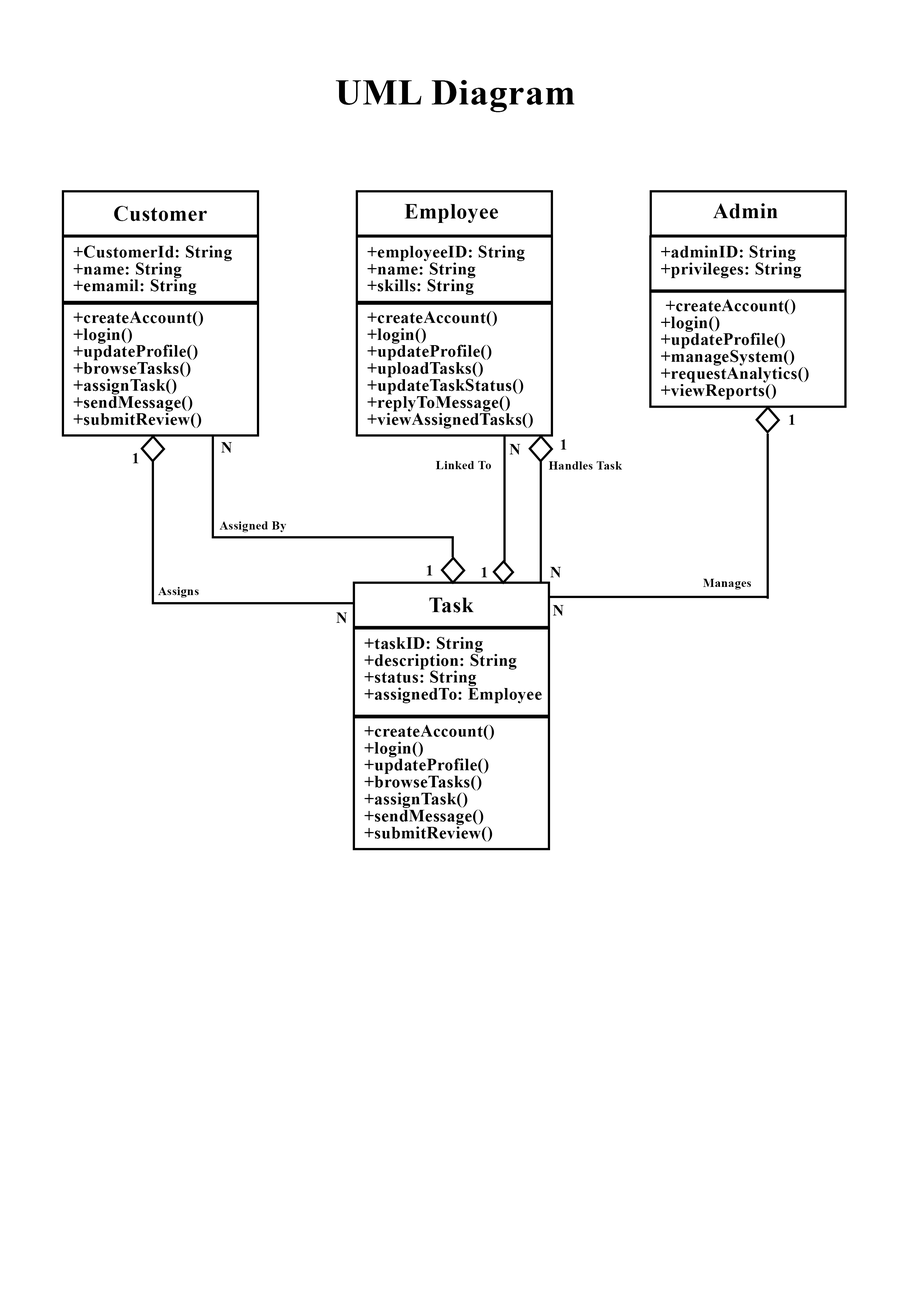
<style>
.page{position:relative;width:918px;height:1299px;background:#ffffff}
.page>*{position:absolute;margin:0}
.t1{font:36px "TimesNewRomanPS-BoldMT";letter-spacing:0.02em;color:#000000}
.t2{font:21.6px "TimesNewRomanPS-BoldMT";letter-spacing:0.02em;color:#000000}
.t3{font:17px/17px "TimesNewRomanPS-BoldMT";letter-spacing:0.02em;color:#000000}
.t4{font:15.4px "TimesNewRomanPS-BoldMT";letter-spacing:0.02em;color:#000000}
.t5{font:12.3px "TimesNewRomanPS-BoldMT";letter-spacing:0.02em;color:#000000}
</style>
<div class="page">
<p class="t1" style="left:336px;top:80px;width:239px;height:32px">UML Diagram</p>
<p class="t2" style="left:114px;top:206px;width:93px;height:15px">Customer</p>
<p class="t2" style="left:405px;top:204px;width:93px;height:19px">Employee</p>
<p class="t2" style="left:713px;top:203px;width:65px;height:15px">Admin</p>
<p class="t3" style="left:74px;top:245px;width:158px;height:50px">+CustomerId: String<br>+name: String<br>+emamil: String</p>
<p class="t3" style="left:368px;top:245px;width:157px;height:50px">+employeeID: String<br>+name: String<br>+skills: String</p>
<p class="t3" style="left:661px;top:245px;width:141px;height:33px">+adminID: String<br>+privileges: String</p>
<p class="t3" style="left:661px;top:299px;width:148px;height:100px">+createAccount()<br>+login()<br>+updateProfile()<br>+manageSystem()<br>+requestAnalytics()<br>+viewReports()</p>
<p class="t3" style="left:74px;top:311px;width:129px;height:117px">+createAccount()<br>+login()<br>+updateProfile()<br>+browseTasks()<br>+assignTask()<br>+sendMessage()<br>+submitReview()</p>
<p class="t3" style="left:368px;top:311px;width:165px;height:117px">+createAccount()<br>+login()<br>+updateProfile()<br>+uploadTasks()<br>+updateTaskStatus()<br>+replyToMessage()<br>+viewAssignedTasks()</p>
<p class="t4" style="left:789px;top:414px;width:6px;height:11px">1</p>
<p class="t4" style="left:221px;top:442px;width:11px;height:11px">N</p>
<p class="t4" style="left:509px;top:444px;width:12px;height:11px">N</p>
<p class="t4" style="left:561px;top:439px;width:5px;height:10px">1</p>
<p class="t4" style="left:133px;top:453px;width:5px;height:10px">1</p>
<p class="t5" style="left:436px;top:461px;width:55px;height:8px">Linked To</p>
<p class="t5" style="left:549px;top:461px;width:73px;height:8px">Handles Task</p>
<p class="t5" style="left:220px;top:521px;width:67px;height:11px">Assigned By</p>
<p class="t4" style="left:426px;top:565px;width:6px;height:10px">1</p>
<p class="t4" style="left:481px;top:567px;width:6px;height:10px">1</p>
<p class="t4" style="left:550px;top:567px;width:11px;height:11px">N</p>
<p class="t5" style="left:703px;top:579px;width:48px;height:10px">Manages</p>
<p class="t5" style="left:158px;top:587px;width:41px;height:11px">Assigns</p>
<p class="t2" style="left:429px;top:598px;width:45px;height:14px">Task</p>
<p class="t4" style="left:553px;top:605px;width:11px;height:11px">N</p>
<p class="t4" style="left:336px;top:612px;width:11px;height:11px">N</p>
<p class="t3" style="left:365px;top:637px;width:177px;height:66px">+taskID: String<br>+description: String<br>+status: String<br>+assignedTo: Employee</p>
<p class="t3" style="left:365px;top:725px;width:129px;height:117px">+createAccount()<br>+login()<br>+updateProfile()<br>+browseTasks()<br>+assignTask()<br>+sendMessage()<br>+submitReview()</p>
</div>
